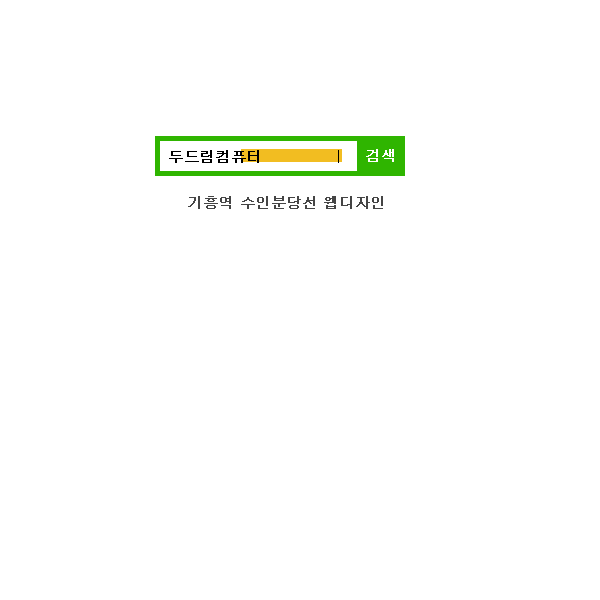
<style>
.page{position:relative;width:600px;height:600px;background:#ffffff}
.page>*{position:absolute;margin:0}
.t1{font:15px "Dotum";letter-spacing:-0.025em;color:#000000;font-weight:bold}
.t2{font:15px "Dotum";letter-spacing:-0.025em;color:#ffffff;font-weight:bold}
.t3{font:15px "Dotum";letter-spacing:-0.025em;color:#454545;font-weight:bold}
</style>
<div class="page">
<p class="t1" style="left:169px;top:150px;width:90px;height:13px">두드림컴퓨터</p>
<p class="t2" style="left:366px;top:149px;width:28px;height:13px">검색</p>
<p class="t3" style="left:188px;top:196px;width:195px;height:13px">기흥역 수인분당선 웹디자인</p>
</div>
